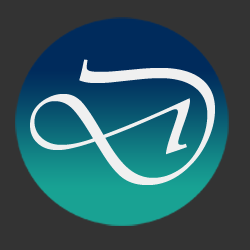
<style>
.page{position:relative;width:250px;height:250px;background:#333333}
.page>*{position:absolute;margin:0}
.t1{font:174.4px "Vivaldii";color:#f0f0f0}
</style>
<div class="page">
<p class="t1" style="left:30px;top:59px;width:185px;height:126px">D</p>
</div>
